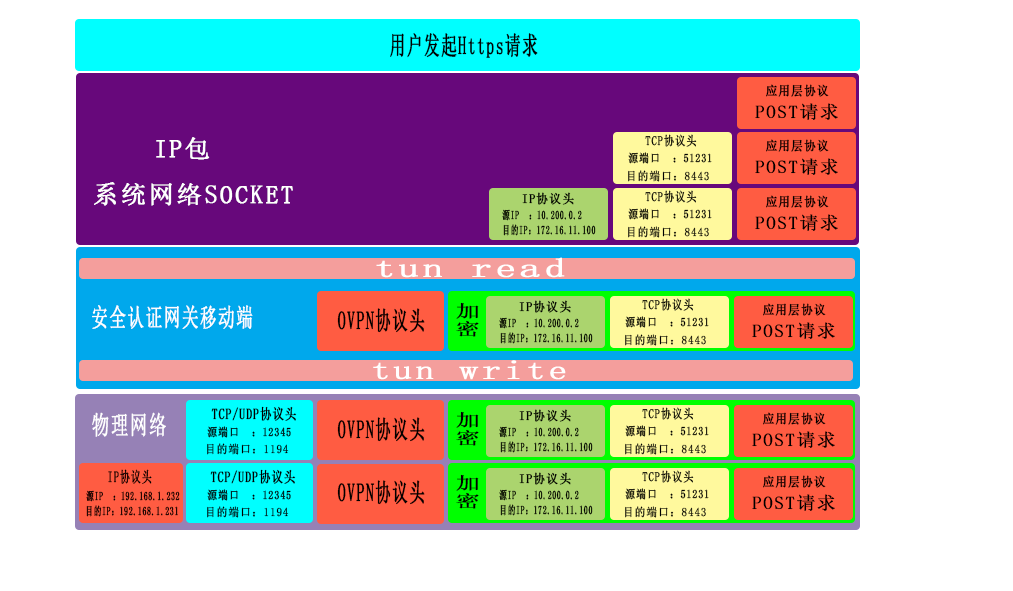
<style>
.page{position:relative;width:1013px;height:591px;background:#ffffff}
.page>*{position:absolute;margin:0}
.t1{font:25.4px "SimSun";letter-spacing:0.075em;color:#000000;font-weight:bold;scale:0.61 1}
.t2{font:12.7px "SimSun";letter-spacing:0.075em;color:#000000;font-weight:bold;scale:0.91 1}
.t3{font:17.9px "SimSun";letter-spacing:0.075em;color:#000000;font-weight:bold;scale:1.03 1}
.t4{font:25.4px "SimSun";letter-spacing:0.075em;color:#ffffff;font-weight:bold}
.t5{font:12.7px "SimSun";letter-spacing:0.075em;color:#000000;font-weight:bold;scale:0.8 1}
.t6{font:11.8px "SimSun";letter-spacing:0.075em;color:#000000;font-weight:bold;scale:0.83 1}
.t7{font:11.8px "SimSun";letter-spacing:0.075em;color:#000000;font-weight:bold;scale:0.9 1}
.t8{font:12.9px "SimSun";letter-spacing:0.075em;color:#000000;font-weight:bold;scale:0.92 1}
.t9{font:11.8px "SimSun";letter-spacing:0.075em;color:#000000;font-weight:bold;scale:0.64 1}
.t10{font:27px "SimSun";letter-spacing:0.075em;color:#ffffff;font-weight:bold;scale:1.49 1}
.t11{font:25.4px "SimSun";letter-spacing:0.075em;color:#ffffff;font-weight:bold;scale:0.65 1}
.t12{font:17.3px "SimSun";letter-spacing:0.075em;color:#000000;font-weight:bold;scale:1.38 1}
.t13{font:27px "SimSun";letter-spacing:0.075em;color:#ffffff;font-weight:bold;scale:1.36 1}
.t14{font:26.2px "SimSun";letter-spacing:0.075em;color:#ffffff;font-weight:bold;scale:0.66 1}
.t15{font:14.9px "SimSun";letter-spacing:0.075em;color:#000000;font-weight:bold;scale:0.77 1}
.t16{font:15.1px "SimSun";letter-spacing:0.075em;color:#000000;font-weight:bold;scale:0.66 1}
</style>
<div class="page">
<p class="t1" style="left:390px;top:33px;width:148px;height:25px">用户发起Https请求</p>
<p class="t2" style="left:766px;top:84px;width:63px;height:13px">应用层协议</p>
<p class="t3" style="left:755px;top:103px;width:83px;height:17px">POST请求</p>
<p class="t4" style="left:156px;top:137px;width:54px;height:23px">IP包</p>
<p class="t5" style="left:645px;top:134px;width:52px;height:13px">TCP协议头</p>
<p class="t2" style="left:766px;top:139px;width:63px;height:13px">应用层协议</p>
<p class="t6" style="left:628px;top:152px;width:84px;height:12px">源端口  ：51231</p>
<p class="t3" style="left:755px;top:158px;width:83px;height:17px">POST请求</p>
<p class="t7" style="left:628px;top:170px;width:81px;height:12px">目的端口：8443</p>
<p class="t4" style="left:94px;top:182px;width:199px;height:24px">系统网络SOCKET</p>
<p class="t8" style="left:522px;top:192px;width:52px;height:13px">IP协议头</p>
<p class="t5" style="left:645px;top:190px;width:52px;height:13px">TCP协议头</p>
<p class="t2" style="left:766px;top:195px;width:63px;height:13px">应用层协议</p>
<p class="t9" style="left:502px;top:209px;width:80px;height:12px">源IP  ：10.200.0.2</p>
<p class="t6" style="left:628px;top:208px;width:84px;height:12px">源端口  ：51231</p>
<p class="t3" style="left:755px;top:214px;width:83px;height:17px">POST请求</p>
<p class="t9" style="left:503px;top:224px;width:93px;height:12px">目的IP：172.16.11.100</p>
<p class="t7" style="left:628px;top:226px;width:81px;height:12px">目的端口：8443</p>
<p class="t10" style="left:376px;top:257px;width:189px;height:21px">tun read</p>
<p class="t11" style="left:92px;top:305px;width:161px;height:24px">安全认证网关移动端</p>
<p class="t12" style="left:456px;top:302px;width:23px;height:35px">加密</p>
<p class="t8" style="left:519px;top:300px;width:52px;height:13px">IP协议头</p>
<p class="t5" style="left:642px;top:298px;width:52px;height:13px">TCP协议头</p>
<p class="t2" style="left:763px;top:303px;width:63px;height:13px">应用层协议</p>
<p class="t1" style="left:337px;top:308px;width:88px;height:25px">OVPN协议头</p>
<p class="t9" style="left:499px;top:317px;width:80px;height:12px">源IP  ：10.200.0.2</p>
<p class="t6" style="left:625px;top:316px;width:84px;height:12px">源端口  ：51231</p>
<p class="t3" style="left:752px;top:322px;width:83px;height:17px">POST请求</p>
<p class="t9" style="left:500px;top:332px;width:93px;height:12px">目的IP：172.16.11.100</p>
<p class="t7" style="left:625px;top:334px;width:81px;height:12px">目的端口：8443</p>
<p class="t13" style="left:373px;top:360px;width:193px;height:20px">tun write</p>
<p class="t14" style="left:92px;top:412px;width:74px;height:25px">物理网络</p>
<p class="t15" style="left:211px;top:406px;width:86px;height:15px">TCP/UDP协议头</p>
<p class="t12" style="left:456px;top:411px;width:23px;height:35px">加密</p>
<p class="t8" style="left:519px;top:409px;width:52px;height:13px">IP协议头</p>
<p class="t5" style="left:642px;top:407px;width:52px;height:13px">TCP协议头</p>
<p class="t2" style="left:763px;top:412px;width:63px;height:13px">应用层协议</p>
<p class="t1" style="left:337px;top:417px;width:88px;height:25px">OVPN协议头</p>
<p class="t6" style="left:625px;top:425px;width:84px;height:12px">源端口  ：51231</p>
<p class="t6" style="left:207px;top:426px;width:84px;height:12px">源端口  ：12345</p>
<p class="t9" style="left:499px;top:426px;width:80px;height:12px">源IP  ：10.200.0.2</p>
<p class="t3" style="left:752px;top:431px;width:83px;height:17px">POST请求</p>
<p class="t7" style="left:207px;top:443px;width:82px;height:12px">目的端口：1194</p>
<p class="t9" style="left:500px;top:441px;width:93px;height:12px">目的IP：172.16.11.100</p>
<p class="t7" style="left:625px;top:443px;width:81px;height:12px">目的端口：8443</p>
<p class="t16" style="left:108px;top:469px;width:44px;height:15px">IP协议头</p>
<p class="t15" style="left:210px;top:469px;width:86px;height:15px">TCP/UDP协议头</p>
<p class="t8" style="left:519px;top:472px;width:52px;height:13px">IP协议头</p>
<p class="t5" style="left:642px;top:470px;width:52px;height:13px">TCP协议头</p>
<p class="t1" style="left:337px;top:480px;width:88px;height:25px">OVPN协议头</p>
<p class="t12" style="left:456px;top:474px;width:23px;height:35px">加密</p>
<p class="t2" style="left:763px;top:475px;width:63px;height:13px">应用层协议</p>
<p class="t9" style="left:86px;top:490px;width:94px;height:12px">源IP  ：192.168.1.232</p>
<p class="t6" style="left:207px;top:489px;width:84px;height:12px">源端口  ：12345</p>
<p class="t9" style="left:499px;top:489px;width:80px;height:12px">源IP  ：10.200.0.2</p>
<p class="t6" style="left:625px;top:488px;width:84px;height:12px">源端口  ：51231</p>
<p class="t3" style="left:752px;top:494px;width:83px;height:17px">POST请求</p>
<p class="t9" style="left:86px;top:505px;width:92px;height:12px">目的IP：192.168.1.231</p>
<p class="t7" style="left:207px;top:506px;width:82px;height:12px">目的端口：1194</p>
<p class="t9" style="left:500px;top:504px;width:93px;height:12px">目的IP：172.16.11.100</p>
<p class="t7" style="left:625px;top:506px;width:81px;height:12px">目的端口：8443</p>
</div>
